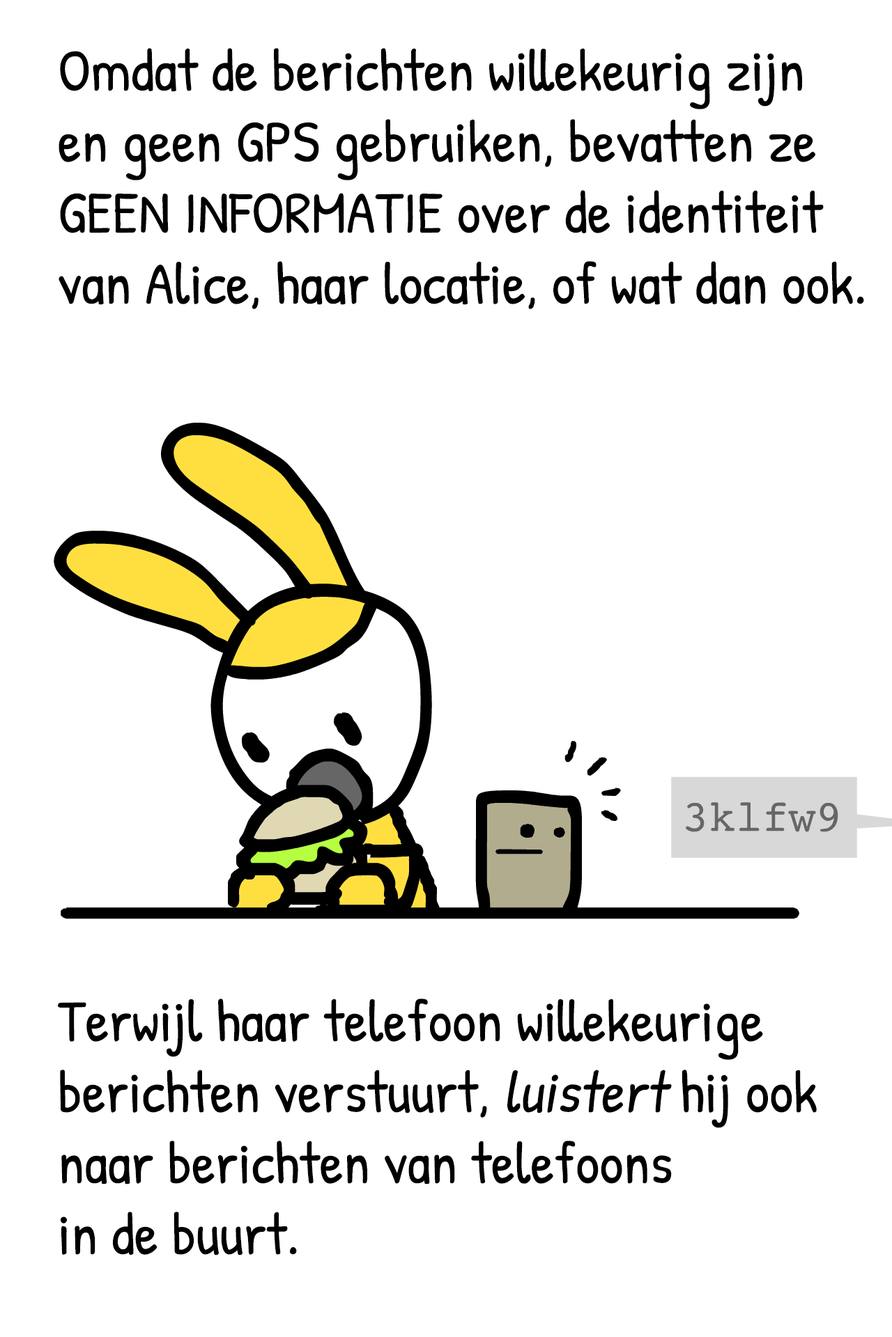
<style>
.page{position:relative;width:892px;height:1337px;background:#ffffff}
.page>*{position:absolute;margin:0}
.t1{font:59.2px "PatrickHand-Regular";color:#000000}
.t2{font:59.2px "PatrickHand-Regular";color:#000000;font-style:italic}
</style>
<div class="page">
<p class="t1" style="left:59px;top:48px;width:805px;height:261px">Omdat de berichten willekeurig zijn<br>en geen GPS gebruiken, bevatten ze<br>GEEN INFORMATIE over de identiteit<br>van Alice, haar locatie, of wat dan ook.</p>
<p class="t1" style="left:57px;top:999px;width:759px;height:257px">Terwijl haar telefoon willekeurige<br>berichten verstuurt, <span class="t2">luistert</span> hij ook<br>naar berichten van telefoons<br>in de buurt.</p>
</div>
